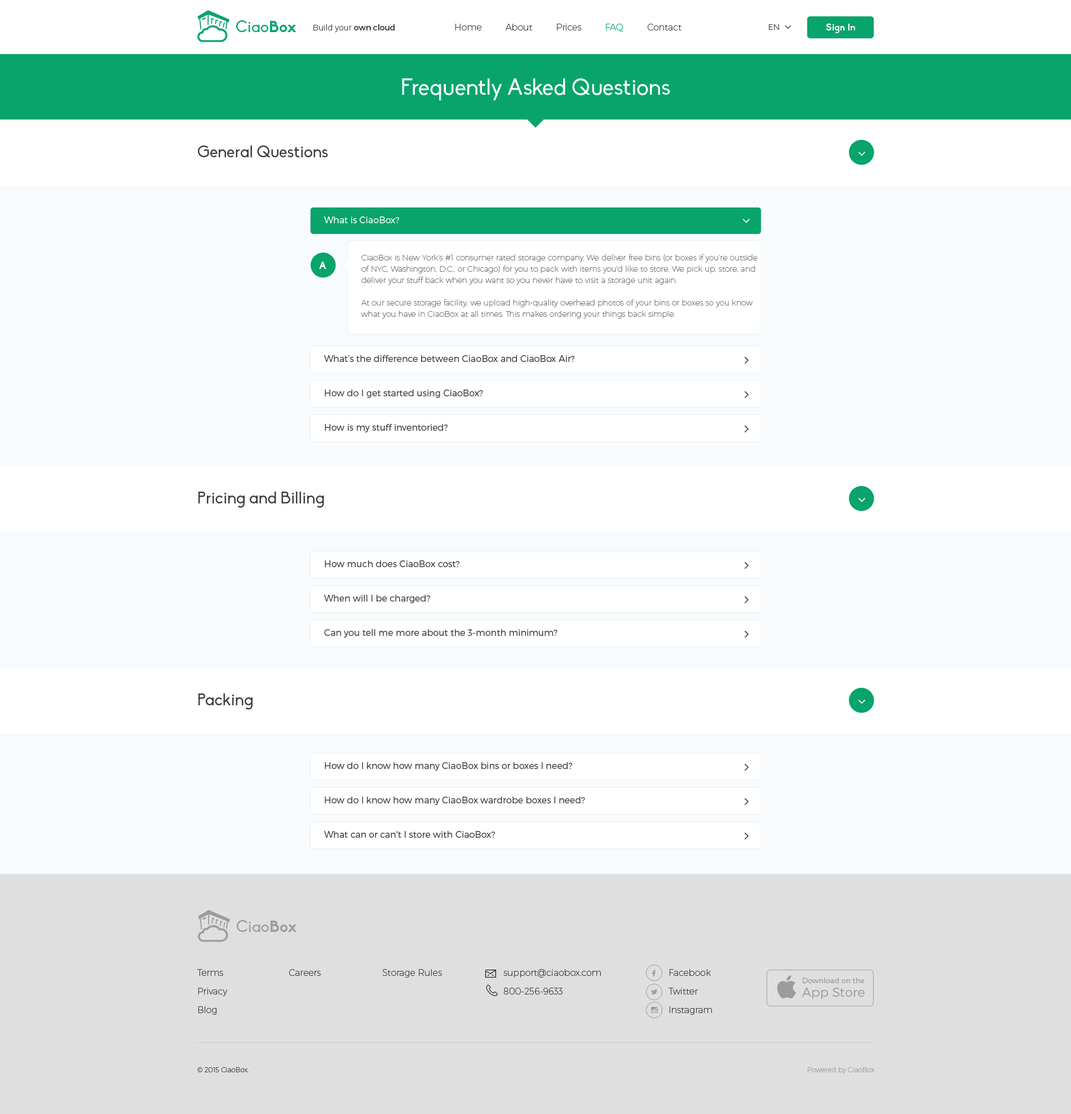
<style>
.page{position:relative;width:1071px;height:1114px;background:#f8fbfd}
.page>*{position:absolute;margin:0}
.t1{font:15.8px "Biko";color:#08a46c}
.t2{font:15.8px "Biko-Bold";color:#08a46c}
.t3{font:7.9px "Montserrat-UltraLight";color:#3d3d3d}
.t4{font:7.9px "Montserrat-Regular";color:#3d3d3d}
.t5{font:9px "Montserrat-UltraLight";color:#3d3d3d}
.t6{font:9px "Montserrat-UltraLight";color:#08a46c}
.t7{font:9.6px "Biko-Bold";color:#ffffff}
.t8{font:22.5px "Biko";color:#f8fbfd}
.t9{font:16.3px "Biko";color:#3d3d3d}
.t10{font:9px "Montserrat-Light";color:#ffffff}
.t11{font:7.9px/11.3px "Montserrat-Hairline";color:#3d3d3d}
.t12{font:10.1px "Biko-Bold";color:#ffffff}
.t13{font:9px "Montserrat-Light";color:#3d3d3d}
.t14{font:15.8px "Biko";color:#9c9c9c}
.t15{font:15.8px "Biko-Bold";color:#9c9c9c}
.t16{font:9px/18.6px "Montserrat-UltraLight";color:#3d3d3d}
.t17{font:10.7px "Socialico";color:#9c9c9c;text-transform:uppercase}
.t18{font:7.3px/18.6px "Montserrat-Light";color:#9c9c9c}
.t19{font:12.8px/13.5px "Montserrat-Light";color:#9c9c9c}
.t20{font:6.8px "font2985";color:#9c9c9c}
.t21{font:6.8px "Montserrat-UltraLight";color:#3d3d3d}
.t22{font:6.8px "Montserrat-UltraLight";color:#9c9c9c}
</style>
<div class="page">
<p class="t1" style="left:236px;top:20px;width:60px;height:12px">Ciao<span class="t2">Box</span></p>
<p class="t3" style="left:313px;top:24px;width:81px;height:8px">Build your <span class="t4">own cloud</span></p>
<p class="t5" style="left:455px;top:24px;width:226px;height:8px">Home         About         Prices         <span class="t6">FAQ         </span>Contact</p>
<p class="t3" style="left:769px;top:24px;width:10px;height:6px">EN</p>
<p class="t7" style="left:826px;top:23px;width:29px;height:10px">Sign In</p>
<p class="t8" style="left:402px;top:78px;width:268px;height:22px">Frequently Asked Questions</p>
<p class="t9" style="left:198px;top:145px;width:130px;height:12px">General Questions</p>
<p class="t10" style="left:324px;top:216px;width:75px;height:7px">What is CiaoBox?</p>
<p class="t11" style="left:361px;top:254px;width:396px;height:64px">CiaoBox is New York’s #1 consumer rated storage company. We deliver free bins (or boxes if you’re outside of NYC, Washington, D.C., or Chicago) for you to pack with items you'd like to store. We pick up, store, and deliver your stuff back when you want so you never have to visit a storage unit again.<br><br>At our secure storage facility, we upload high-quality overhead photos of your bins or boxes so you know what you have in CiaoBox at all times. This makes ordering your things back simple.</p>
<p class="t12" style="left:319px;top:261px;width:7px;height:8px">A</p>
<p class="t13" style="left:324px;top:355px;width:250px;height:7px">What’s the difference between CiaoBox and CiaoBox Air?</p>
<p class="t13" style="left:325px;top:389px;width:158px;height:9px">How do I get started using CiaoBox?</p>
<p class="t13" style="left:325px;top:424px;width:122px;height:8px">How is my stuff inventoried?</p>
<p class="t9" style="left:198px;top:491px;width:126px;height:17px">Pricing and Billing</p>
<p class="t13" style="left:325px;top:560px;width:134px;height:7px">How much does CiaoBox cost?</p>
<p class="t13" style="left:324px;top:595px;width:106px;height:8px">When will I be charged?</p>
<p class="t13" style="left:324px;top:629px;width:233px;height:8px">Can you tell me more about the 3-month minimum?</p>
<p class="t9" style="left:198px;top:693px;width:54px;height:17px">Packing</p>
<p class="t13" style="left:325px;top:762px;width:247px;height:8px">How do I know how many CiaoBox bins or boxes I need?</p>
<p class="t13" style="left:325px;top:796px;width:260px;height:9px">How do I know how many CiaoBox wardrobe boxes I need?</p>
<p class="t13" style="left:324px;top:831px;width:171px;height:6px">What can or can't I store with CiaoBox?</p>
<p class="t14" style="left:237px;top:920px;width:60px;height:12px">Ciao<span class="t15">Box</span></p>
<p class="t16" style="left:197px;top:969px;width:30px;height:45px">Terms<br>Privacy<br>Blog</p>
<p class="t5" style="left:289px;top:969px;width:32px;height:7px">Careers</p>
<p class="t5" style="left:382px;top:969px;width:60px;height:8px">Storage Rules</p>
<p class="t16" style="left:503px;top:969px;width:98px;height:25px">support@ciaobox.com<br>800-256-9633</p>
<p class="t17" style="left:651px;top:969px;width:4px;height:7px">F</p>
<p class="t16" style="left:668px;top:969px;width:44px;height:45px">Facebook<br>Twitter<br>Instagram</p>
<p class="t18" style="left:802px;top:977px;width:63px;height:22px">Download on the<br><span class="t19">App Store</span></p>
<p class="t17" style="left:651px;top:989px;width:7px;height:5px">L</p>
<p class="t20" style="left:651px;top:1007px;width:7px;height:6px">x</p>
<p class="t21" style="left:197px;top:1067px;width:52px;height:5px">© 2015 CiaoBox.</p>
<p class="t22" style="left:808px;top:1067px;width:66px;height:6px">Powered by CiaoBox</p>
</div>
